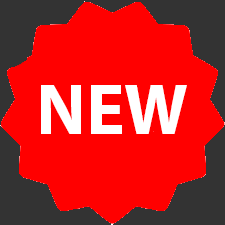
<style>
.page{position:relative;width:225px;height:225px;background:#ff0000}
.page>*{position:absolute;margin:0}
.t1{font:72px "MyriadPro-Bold";color:#ffffff}
</style>
<div class="page">
<p class="t1" style="left:41px;top:85px;width:146px;height:49px">NEW</p>
</div>
